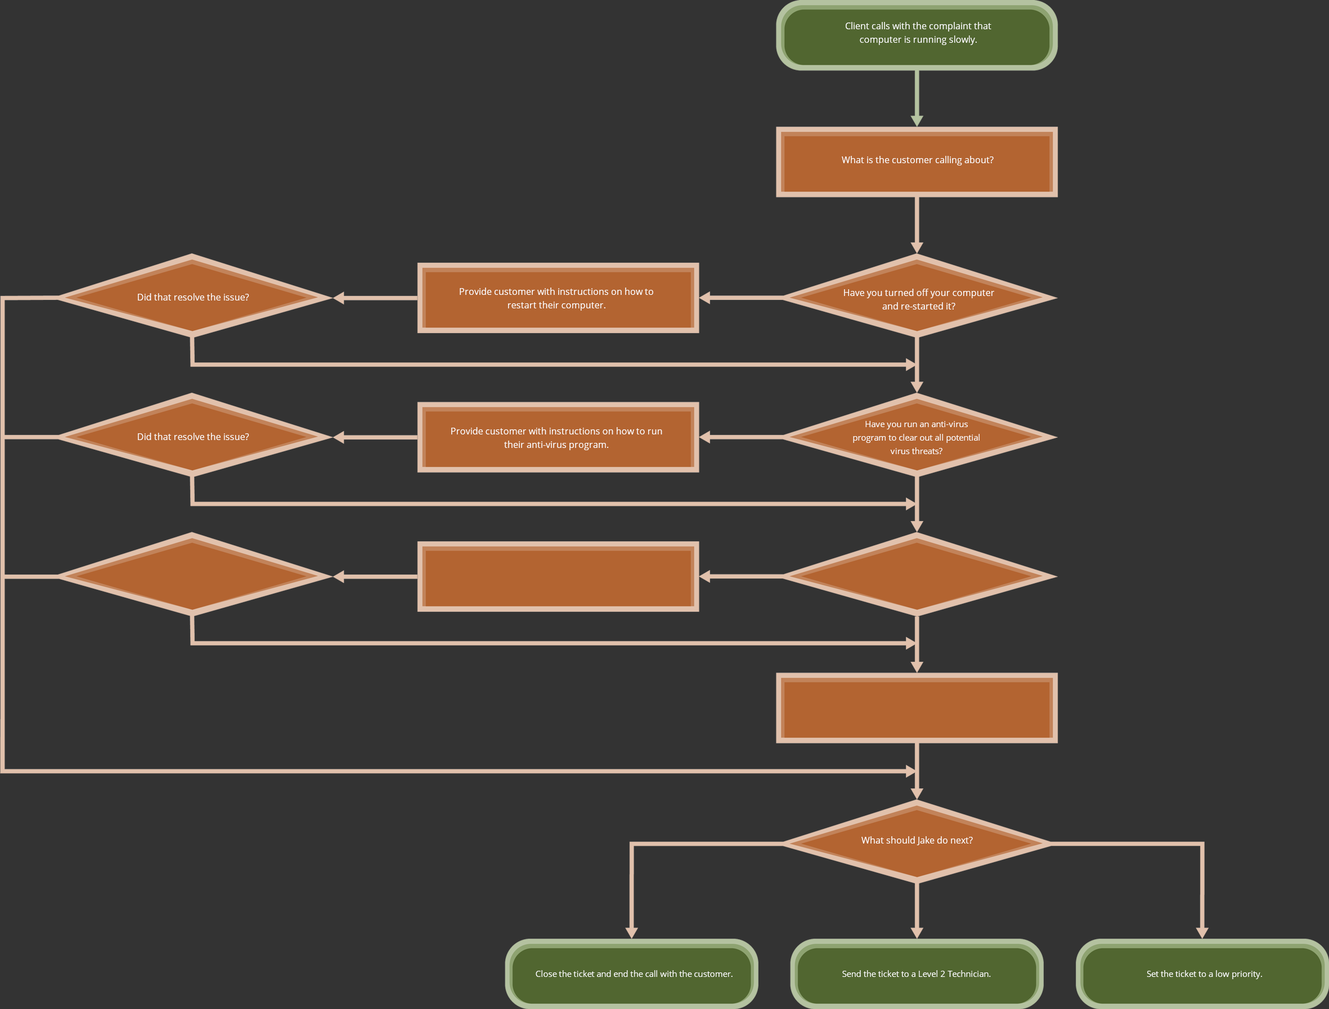
<style>
.page{position:relative;width:1329px;height:1009px;background:#333333}
.page>*{position:absolute;margin:0}
.t1{font:9px/13.5px "OpenSans";color:#ffffff}
.t2{font:9px "OpenSans";color:#ffffff}
.t3{font:8.4px/13.5px "OpenSans";color:#ffffff}
.t4{font:8.4px "OpenSans";color:#ffffff}
</style>
<div class="page">
<p class="t1" style="left:845px;top:22px;width:146px;height:23px;text-align:center">Client calls with the complaint that <br>computer is running slowly.</p>
<p class="t2" style="left:842px;top:156px;width:151px;height:9px">What is the customer calling about?</p>
<p class="t2" style="left:138px;top:293px;width:111px;height:7px">Did that resolve the issue?</p>
<p class="t1" style="left:460px;top:287px;width:193px;height:23px;text-align:center">Provide customer with instructions on how to restart their computer.</p>
<p class="t1" style="left:844px;top:289px;width:150px;height:20px;text-align:center">Have you turned off your computer <br>and re-started it?</p>
<p class="t3" style="left:853px;top:421px;width:126px;height:33px;text-align:center">Have you run an anti-virus program to clear out all potential virus threats?</p>
<p class="t2" style="left:138px;top:433px;width:111px;height:7px">Did that resolve the issue?</p>
<p class="t1" style="left:451px;top:427px;width:211px;height:23px;text-align:center">Provide customer with instructions on how to run their anti-virus program.</p>
<p class="t2" style="left:861px;top:836px;width:112px;height:9px">What should Jake do next?</p>
<p class="t4" style="left:536px;top:970px;width:196px;height:6px">Close the ticket and end the call with the customer.</p>
<p class="t4" style="left:842px;top:970px;width:149px;height:6px">Send the ticket to a Level 2 Technician.</p>
<p class="t4" style="left:1146px;top:970px;width:116px;height:9px">Set the ticket to a low priority.</p>
</div>
